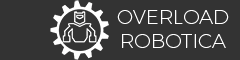
<style>
.page{position:relative;width:240px;height:60px;background:#333333}
.page>*{position:absolute;margin:0}
.t1{font:20px "Montserrat-UltraLight";color:#ffffff}
</style>
<div class="page">
<p class="t1" style="left:117px;top:10px;width:112px;height:38px;text-align:center">OVERLOAD<br>ROBOTICA</p>
</div>
